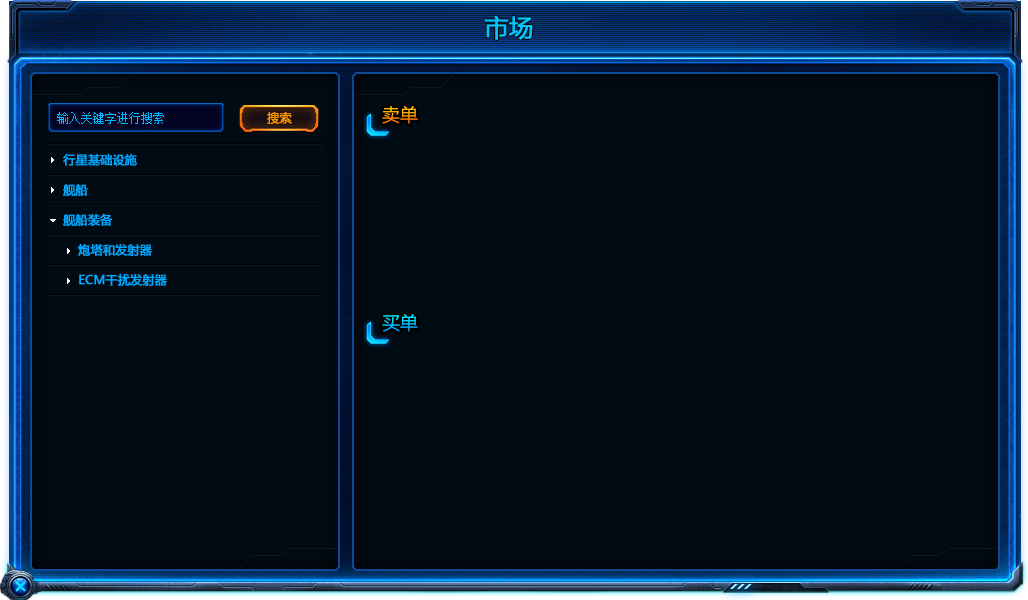
<style>
.page{position:relative;width:1028px;height:600px;background:#010b13}
.page>*{position:absolute;margin:0}
.t1{font:24px "MicrosoftYaHei";color:#00c6ff;font-weight:bold}
.t2{font:12px "SimSun";color:#00baff}
.t3{font:12px "MicrosoftYaHei";color:#ff9600;font-weight:bold}
.t4{font:18px "MicrosoftYaHei";color:#ffb200}
.t5{font:12px "MicrosoftYaHei";color:#00a8ff;font-weight:bold}
.t6{font:18px "MicrosoftYaHei";color:#01d7ff}
</style>
<div class="page">
<p class="t1" style="left:484px;top:15px;width:49px;height:25px">市场</p>
<p class="t2" style="left:57px;top:112px;width:107px;height:12px">输入关键字进行搜索</p>
<p class="t3" style="left:267px;top:112px;width:25px;height:12px">搜索</p>
<p class="t4" style="left:382px;top:106px;width:36px;height:18px">卖单</p>
<p class="t5" style="left:63px;top:153px;width:74px;height:13px">行星基础设施</p>
<p class="t5" style="left:63px;top:184px;width:25px;height:12px">舰船</p>
<p class="t5" style="left:63px;top:213px;width:50px;height:13px">舰船装备</p>
<p class="t5" style="left:78px;top:244px;width:74px;height:12px">炮塔和发射器</p>
<p class="t5" style="left:79px;top:274px;width:88px;height:12px">ECM干扰发射器</p>
<p class="t6" style="left:382px;top:314px;width:36px;height:18px">买单</p>
</div>
